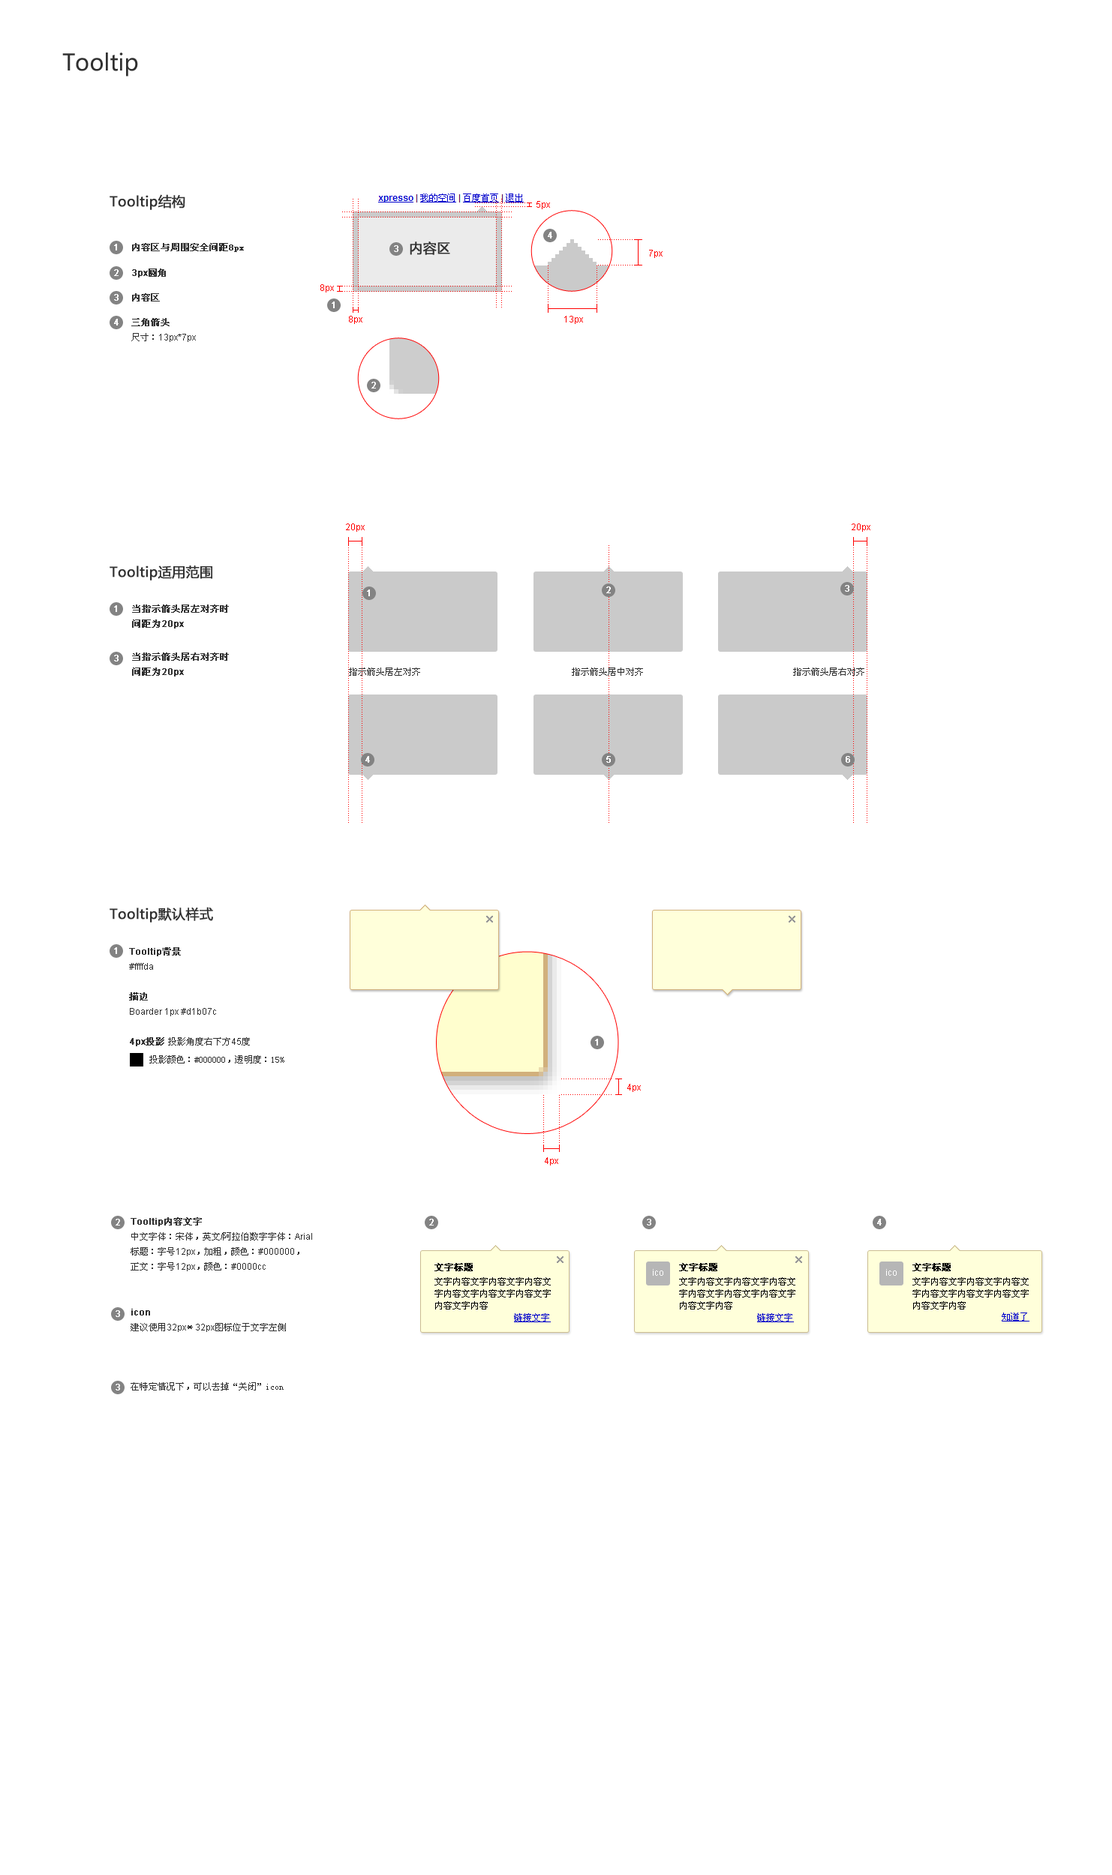
<style>
.page{position:relative;width:1112px;height:1875px;background:#ffffff}
.page>*{position:absolute;margin:0}
.t1{font:22.5px "MicrosoftYaHei";color:#303030}
.t2{font:13.5px "MicrosoftYaHei";color:#303030;font-weight:bold}
.t3{font:9px "ArialMT";color:#ff0000}
.t4{font:9px "ArialMT";color:#ffffff;font-weight:bold}
.t5{font:9px "NSimSun";color:#303030;font-weight:bold}
.t6{font:9px "ArialMT";color:#303030;font-weight:bold}
.t7{font:9px/15px "ArialMT";color:#303030}
.t8{font:9px/15px "NSimSun";color:#303030;font-weight:bold}
.t9{font:9px/15px "NSimSun";color:#303030}
.t10{font:9px/15px "ArialMT";color:#303030;font-weight:bold}
.t11{font:9px "NSimSun";color:#303030}
.t12{font:9px/15px "STHeitiSC-Light";color:#303030;font-weight:bold}
.t13{font:9px "NSimSun";color:#000000;font-weight:bold}
.t14{font:9px/12px "NSimSun";color:#000000}
.t15{font:9px "NSimSun";color:#0000cc;text-decoration:underline}
</style>
<div class="page">
<p class="t1" style="left:62px;top:52px;width:76px;height:24px">Tooltip</p>
<p class="t2" style="left:110px;top:194px;width:75px;height:16px">Tooltip结构</p>
<p class="t3" style="left:536px;top:201px;width:14px;height:8px">5px</p>
<p class="t4" style="left:548px;top:232px;width:4px;height:6px">4</p>
<p class="t4" style="left:114px;top:244px;width:3px;height:6px">1</p>
<p class="t5" style="left:132px;top:243px;width:112px;height:9px">内容区与周围安全间距8px</p>
<p class="t4" style="left:394px;top:245px;width:4px;height:7px">3</p>
<p class="t2" style="left:410px;top:242px;width:40px;height:13px">内容区</p>
<p class="t3" style="left:649px;top:250px;width:13px;height:8px">7px</p>
<p class="t4" style="left:114px;top:269px;width:4px;height:7px">2</p>
<p class="t6" style="left:132px;top:268px;width:34px;height:10px">3px<span class="t5">圆角</span></p>
<p class="t4" style="left:114px;top:294px;width:4px;height:7px">3</p>
<p class="t5" style="left:132px;top:293px;width:28px;height:9px">内容区</p>
<p class="t3" style="left:320px;top:284px;width:14px;height:8px">8px</p>
<p class="t4" style="left:332px;top:302px;width:2px;height:6px">1</p>
<p class="t7" style="left:131px;top:318px;width:65px;height:24px"><span class="t8">三角箭头<br></span><span class="t9">尺寸：</span>13px*7px</p>
<p class="t3" style="left:349px;top:316px;width:13px;height:8px">8px</p>
<p class="t3" style="left:564px;top:316px;width:19px;height:8px">13px</p>
<p class="t4" style="left:114px;top:319px;width:4px;height:7px">4</p>
<p class="t4" style="left:371px;top:382px;width:5px;height:6px">2</p>
<p class="t3" style="left:346px;top:524px;width:18px;height:8px">20px</p>
<p class="t3" style="left:851px;top:524px;width:19px;height:8px">20px</p>
<p class="t2" style="left:110px;top:566px;width:102px;height:14px">Tooltip适用范围</p>
<p class="t4" style="left:367px;top:590px;width:3px;height:6px">1</p>
<p class="t4" style="left:606px;top:586px;width:4px;height:7px">2</p>
<p class="t4" style="left:844px;top:585px;width:5px;height:7px">3</p>
<p class="t4" style="left:114px;top:605px;width:3px;height:7px">1</p>
<p class="t8" style="left:132px;top:604px;width:97px;height:24px">当指示箭头居左对齐时<br>间距为<span class="t10">20px</span></p>
<p class="t8" style="left:132px;top:652px;width:97px;height:24px">当指示箭头居右对齐时<br>间距为<span class="t10">20px</span></p>
<p class="t4" style="left:114px;top:655px;width:4px;height:7px">3</p>
<p class="t11" style="left:349px;top:668px;width:71px;height:8px">指示箭头居左对齐</p>
<p class="t11" style="left:572px;top:668px;width:71px;height:8px">指示箭头居中对齐</p>
<p class="t11" style="left:793px;top:668px;width:71px;height:8px">指示箭头居右对齐</p>
<p class="t4" style="left:365px;top:756px;width:5px;height:7px">4</p>
<p class="t4" style="left:606px;top:756px;width:4px;height:7px">5</p>
<p class="t4" style="left:845px;top:756px;width:5px;height:7px">6</p>
<p class="t2" style="left:110px;top:907px;width:103px;height:15px">Tooltip默认样式</p>
<p class="t4" style="left:114px;top:947px;width:3px;height:7px">1</p>
<p class="t7" style="left:129px;top:947px;width:121px;height:99px"><span class="t10">Tooltip</span><span class="t8">背景<br></span>#ffffda<br><br><span class="t12">描边<br></span>Boarder 1px #d1b07c<br><br><span class="t10">4px</span><span class="t8">投影 </span><span class="t9">投影角度右下方</span>45<span class="t9">度</span></p>
<p class="t4" style="left:595px;top:1039px;width:3px;height:7px">1</p>
<p class="t11" style="left:149px;top:1055px;width:135px;height:9px">投影颜色：#000000，透明度：15%</p>
<p class="t3" style="left:627px;top:1084px;width:13px;height:8px">4px</p>
<p class="t3" style="left:544px;top:1157px;width:14px;height:9px">4px</p>
<p class="t9" style="left:130px;top:1217px;width:182px;height:54px"><span class="t10">Tooltip</span><span class="t8">内容文字<br></span>中文字体：宋体，英文<span class="t7">/</span>阿拉伯数字字体：<span class="t7">Arial<br></span>标题：字号<span class="t7">12px</span>，加粗，颜色：<span class="t7">#000000</span>，<br>正文：字号<span class="t7">12px</span>，颜色：<span class="t7">#0000cc</span></p>
<p class="t4" style="left:116px;top:1219px;width:4px;height:7px">2</p>
<p class="t4" style="left:429px;top:1219px;width:5px;height:7px">2</p>
<p class="t4" style="left:646px;top:1219px;width:5px;height:7px">3</p>
<p class="t4" style="left:877px;top:1219px;width:4px;height:7px">4</p>
<p class="t13" style="left:434px;top:1263px;width:38px;height:8px">文字标题</p>
<p class="t13" style="left:679px;top:1263px;width:38px;height:8px">文字标题</p>
<p class="t13" style="left:912px;top:1263px;width:38px;height:8px">文字标题</p>
<p class="t14" style="left:434px;top:1277px;width:116px;height:33px">文字内容文字内容文字内容文字内容文字内容文字内容文字内容文字内容</p>
<p class="t14" style="left:679px;top:1277px;width:116px;height:33px">文字内容文字内容文字内容文字内容文字内容文字内容文字内容文字内容</p>
<p class="t14" style="left:912px;top:1277px;width:116px;height:33px">文字内容文字内容文字内容文字内容文字内容文字内容文字内容文字内容</p>
<p class="t4" style="left:116px;top:1310px;width:4px;height:7px">3</p>
<p class="t9" style="left:130px;top:1309px;width:156px;height:23px"><span class="t10">icon<br></span>建议使用<span class="t7">32px</span>＊<span class="t7">32px</span>图标位于文字左侧</p>
<p class="t15" style="left:514px;top:1313px;width:36px;height:9px">链接文字</p>
<p class="t15" style="left:757px;top:1313px;width:37px;height:9px">链接文字</p>
<p class="t15" style="left:1001px;top:1312px;width:28px;height:10px">知道了</p>
<p class="t4" style="left:116px;top:1384px;width:4px;height:6px">3</p>
<p class="t11" style="left:130px;top:1382px;width:154px;height:8px">在特定情况下，可以去掉“关闭”icon</p>
</div>
